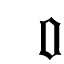
<style>
.page{position:relative;width:64px;height:64px;background:#ffffff}
.page>*{position:absolute;margin:0}
.t1{font:57.4px "AnglicanText";letter-spacing:0.045em;color:#000000;text-transform:uppercase}
</style>
<div class="page">
<p class="t1" style="left:38px;top:16px;width:24px;height:44px">0</p>
</div>
